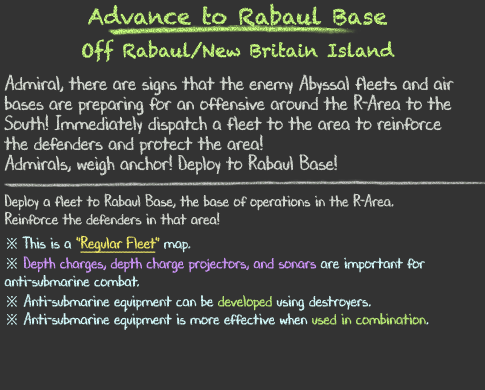
<style>
.page{position:relative;width:485px;height:390px;background:#333333}
.page>*{position:absolute;margin:0}
.t1{font:18px/36px "Chalkduster"}
.t2{font:22px/36px "Chalkduster"}
.t3{font:20px/20px "DJBChalkItUp";color:#d9ded6;scale:0.9 1}
.t4{font:16px/18px "DJBChalkItUp";color:#d9ded6;scale:0.9 1}
.t5{font:16px/24px "DJBChalkItUp";color:#d9ded6;scale:0.9 1}
.t6{font:16px/20px "TimesNewRomanPSMT";color:#d7feff;scale:0.9 1}
.t7{font:16px/20px "DJBChalkItUp";color:#d7feff;scale:0.9 1}
.t8{font:16px/20px "DJBChalkItUp";color:#f5ed68;scale:0.9 1}
.t9{font:16px/20px "DJBChalkItUp";color:#f5ed68;text-decoration:underline;scale:0.9 1}
.t10{font:16px/18px "TimesNewRomanPSMT";color:#d7feff;scale:0.9 1}
.t11{font:16px/18px "DJBChalkItUp";color:#d298ff;scale:0.9 1}
.t12{font:16px/18px "DJBChalkItUp";color:#d7feff;scale:0.9 1}
.t13{font:16px/18px "DJBChalkItUp";color:#bdef78;scale:0.9 1}
</style>
<div class="page">
<p class="t1" style="left:82px;top:3px;width:313px;height:59px;text-align:center"><span class="t2">Advance to Rabaul Base<br></span>Off Rabaul/New Britain Island</p>
<p class="t3" style="left:4px;top:74px;width:450px;height:256px">Admiral, there are signs that the enemy Abyssal fleets and air<br>bases are preparing for an offensive around the R-Area to the<br>South! Immediately dispatch a fleet to the area to reinforce<br>the defenders and protect the area!<br>Admirals, weigh anchor! Deploy to Rabaul Base!<br><br><span class="t4">Deploy a fleet to Rabaul Base, the base of operations in the R-Area.<br></span><span class="t5">Reinforce the defenders in that area!<br></span><span class="t6">※ </span><span class="t7">This is a </span><span class="t8">"</span><span class="t9">Regular Fleet</span><span class="t8">"</span><span class="t7"> map.<br></span><span class="t10">※ </span><span class="t11">Depth charges, depth charge projectors, and sonars</span><span class="t12"> are important for<br></span><span class="t7">anti-submarine combat.<br></span><span class="t10">※</span><span class="t12"> Anti-submarine equipment can be </span><span class="t13">developed</span><span class="t12"> using destroyers.<br></span><span class="t10">※</span><span class="t12"> Anti-submarine equipment is more effective when </span><span class="t13">used in combination</span><span class="t12">.</span></p>
</div>
